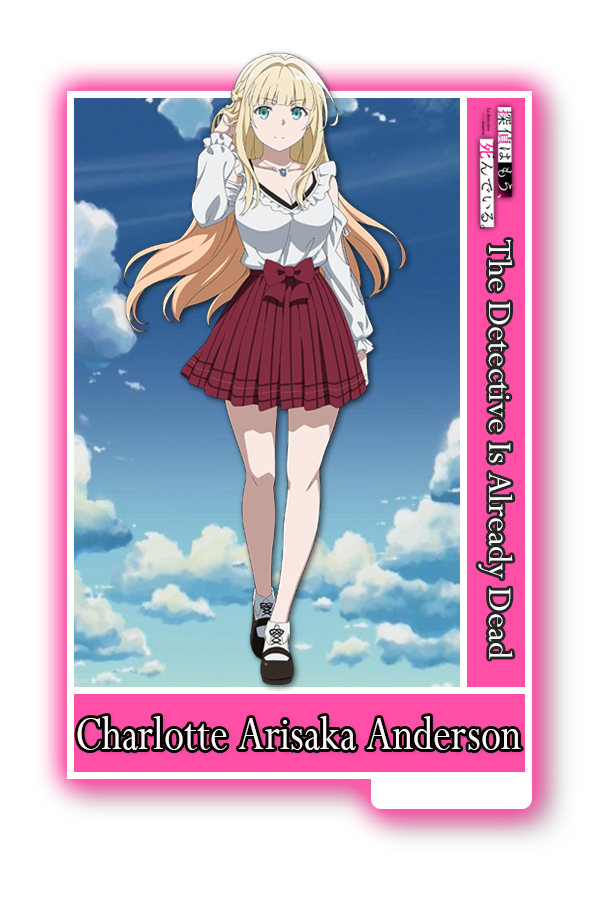
<style>
.page{position:relative;width:600px;height:900px;background:#ffffff}
.page>*{position:absolute;margin:0}
.t1{font:36.5px "Perpetua";color:#ffffff;scale:1.04 1}
.t2{font:53.2px "Perpetua";color:#fff5f5;scale:0.83 1}
</style>
<div class="page">
<p class="t1" style="left:478px;top:240px;width:35px;height:419px;rotate:90deg">The Detective Is Already Dead</p>
<p class="t2" style="left:77px;top:716px;width:444px;height:34px">Charlotte Arisaka Anderson</p>
</div>
